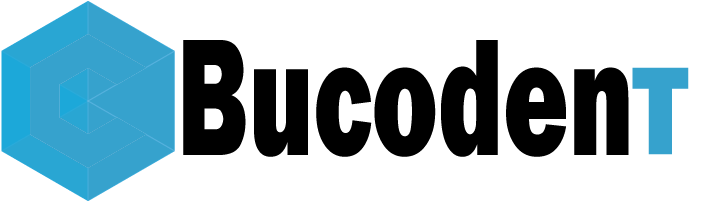
<style>
.page{position:relative;width:720px;height:202px;background:#ffffff}
.page>*{position:absolute;margin:0}
.t1{font:172.3px "FranklinGothic-Heavy";color:#000000;scale:0.65 1}
.t2{font:129.3px "FranklinGothic-Heavy";color:#36a2cd;scale:0.91 1}
</style>
<div class="page">
<p class="t1" style="left:183px;top:40px;width:446px;height:117px">Bucoden</p>
<p class="t2" style="left:632px;top:67px;width:57px;height:88px">T</p>
</div>
